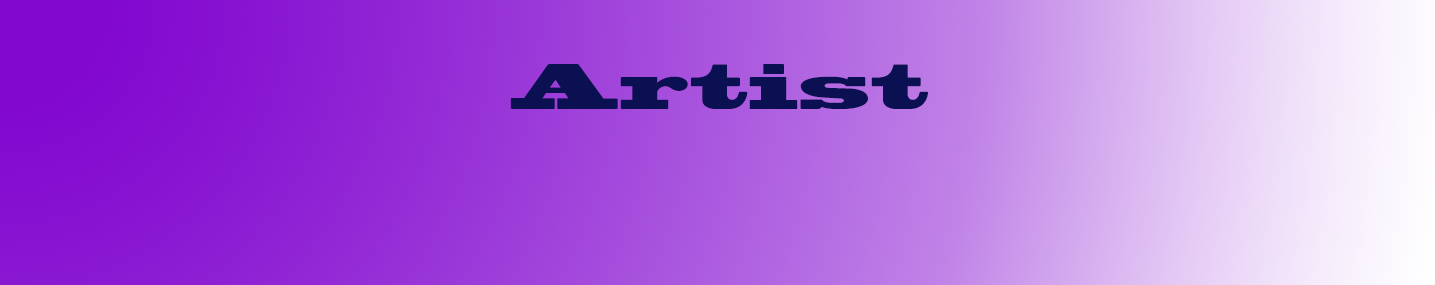
<style>
.page{position:relative;width:1435px;height:285px}
.page>*{position:absolute;margin:0}
.t1{font:60px "BlackoakStd";color:#0b1053}
</style>
<div class="page">
<p class="t1" style="left:510px;top:64px;width:418px;height:45px">Artist</p>
</div>
